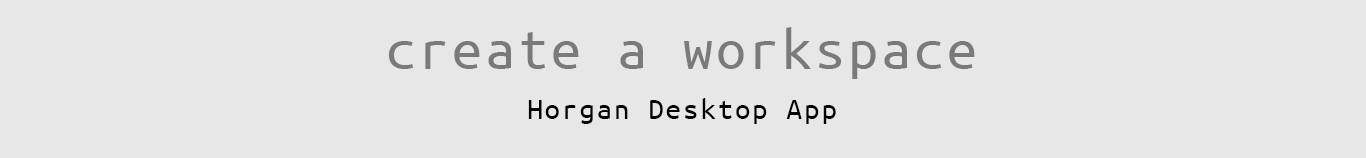
<style>
.page{position:relative;width:1366px;height:158px;background:#e7e7e7}
.page>*{position:absolute;margin:0}
.t1{font:60px "UbuntuMono-Regular";letter-spacing:0.05em;color:#7a7a7a}
.t2{font:31.4px "UbuntuMono-Regular";letter-spacing:0.05em;color:#000000}
</style>
<div class="page">
<p class="t1" style="left:388px;top:27px;width:587px;height:52px">create a workspace</p>
<p class="t2" style="left:528px;top:98px;width:308px;height:26px">Horgan Desktop App</p>
</div>
